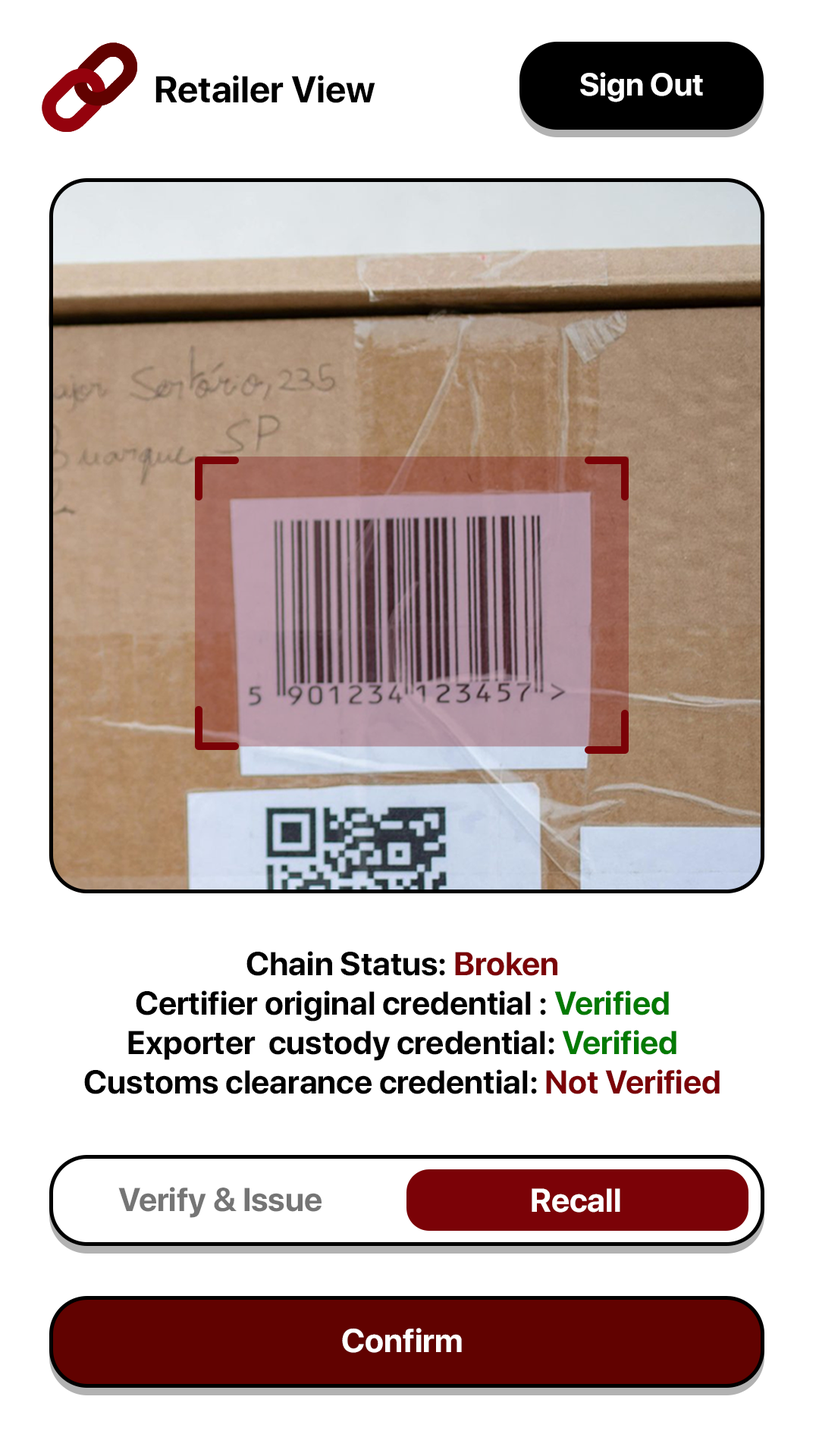
<style>
.page{position:relative;width:819px;height:1456px;background:#ffffff}
.page>*{position:absolute;margin:0}
.t1{font:37.2px "SFProDisplay-Bold";color:#000000}
.t2{font:31.7px "SFProDisplay-Bold";color:#ffffff}
.t3{font:32.9px "SFProDisplay-Bold";color:#000000}
.t4{font:32.9px "SFProDisplay-Bold";color:#7b0207}
.t5{font:32.9px "SFProDisplay-Bold";color:#027a02}
.t6{font:32.9px "SFProDisplay-Bold";color:#757575}
.t7{font:32.9px "SFProDisplay-Bold";color:#ffffff}
</style>
<div class="page">
<p class="t1" style="left:155px;top:75px;width:220px;height:28px">Retailer View</p>
<p class="t2" style="left:580px;top:72px;width:123px;height:30px">Sign Out</p>
<p class="t3" style="left:84px;top:951px;width:636px;height:143px;text-align:center">Chain Status: <span class="t4">Broken<br></span>Certifier original credential : <span class="t5">Verified<br></span>Exporter  custody credential: <span class="t5">Verified<br></span>Customs clearance credential: <span class="t4">Not Verified</span></p>
<p class="t6" style="left:118px;top:1187px;width:204px;height:31px">Verify &amp; Issue</p>
<p class="t7" style="left:532px;top:1188px;width:88px;height:25px">Recall</p>
<p class="t7" style="left:342px;top:1328px;width:120px;height:25px">Confirm</p>
</div>
